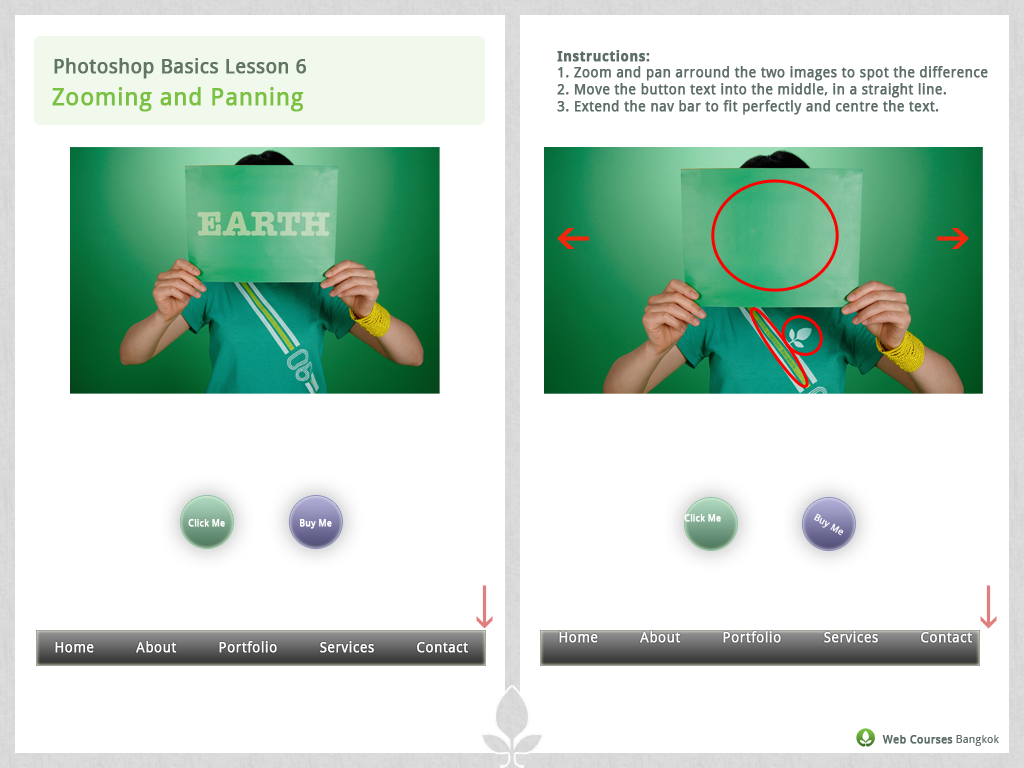
<style>
.page{position:relative;width:1024px;height:768px;background:#ffffff}
.page>*{position:absolute;margin:0}
.t1{font:14px "DroidSans";letter-spacing:0.01em;color:#5d6e66;font-weight:bold}
.t2{font:14px "DroidSans-Bold";letter-spacing:0.01em;color:#5d6e66;font-weight:bold}
.t3{font:19.6px "DroidSans";letter-spacing:0.01em;color:#5d6e66;font-weight:bold}
.t4{font:24px "DroidSans";letter-spacing:0.01em;color:#7ac043;font-weight:bold}
.t5{font:9.1px "DroidSans";letter-spacing:0.01em;color:#ffffff;font-weight:bold}
.t6{font:14px "DroidSans";letter-spacing:0.01em;color:#ffffff;font-weight:bold}
.t7{font:11.1px "DroidSans";letter-spacing:0.01em;color:#5d6e66;font-weight:bold}
.t8{font:11.1px "DroidSans";letter-spacing:0.01em;color:#5d6e66}
</style>
<div class="page">
<p class="t1" style="left:557px;top:50px;width:431px;height:65px"><span class="t2">Instructions:<br></span>1. Zoom and pan arround the two images to spot the difference<br>2. Move the button text into the middle, in a straight line.<br>3. Extend the nav bar to fit perfectly and centre the text.</p>
<p class="t3" style="left:54px;top:58px;width:252px;height:21px">Photoshop Basics Lesson 6</p>
<p class="t4" style="left:52px;top:87px;width:252px;height:25px">Zooming and Panning</p>
<p class="t5" style="left:188px;top:519px;width:37px;height:8px">Click Me</p>
<p class="t5" style="left:300px;top:519px;width:32px;height:10px">Buy Me</p>
<p class="t5" style="left:684px;top:514px;width:37px;height:8px">Click Me</p>
<p class="t5" style="left:814px;top:513px;width:30px;height:23px;rotate:30deg">Buy Me</p>
<p class="t6" style="left:55px;top:641px;width:413px;height:12px">Home About Portfolio Services Contact</p>
<p class="t6" style="left:559px;top:631px;width:413px;height:12px">Home About Portfolio Services Contact</p>
<p class="t7" style="left:882px;top:735px;width:117px;height:11px">Web Courses<span class="t8"> Bangkok</span></p>
</div>
